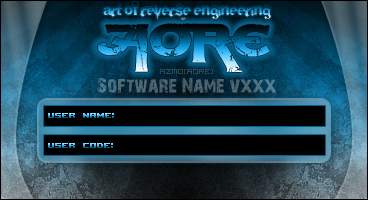
<style>
.page{position:relative;width:368px;height:200px}
.page>*{position:absolute;margin:0}
.t1{font:20px "28-Days-Later-Regular";color:#4f6975}
.t2{font:10px "Acknowledge -BRK-"}
</style>
<div class="page">
<p class="t1" style="left:97px;top:77px;width:180px;height:16px">Software Name vx.xx</p>
<p class="t2" style="left:48px;top:113px;width:66px;height:5px">USER NAME:</p>
<p class="t2" style="left:48px;top:143px;width:65px;height:5px">USER CODE:</p>
</div>
